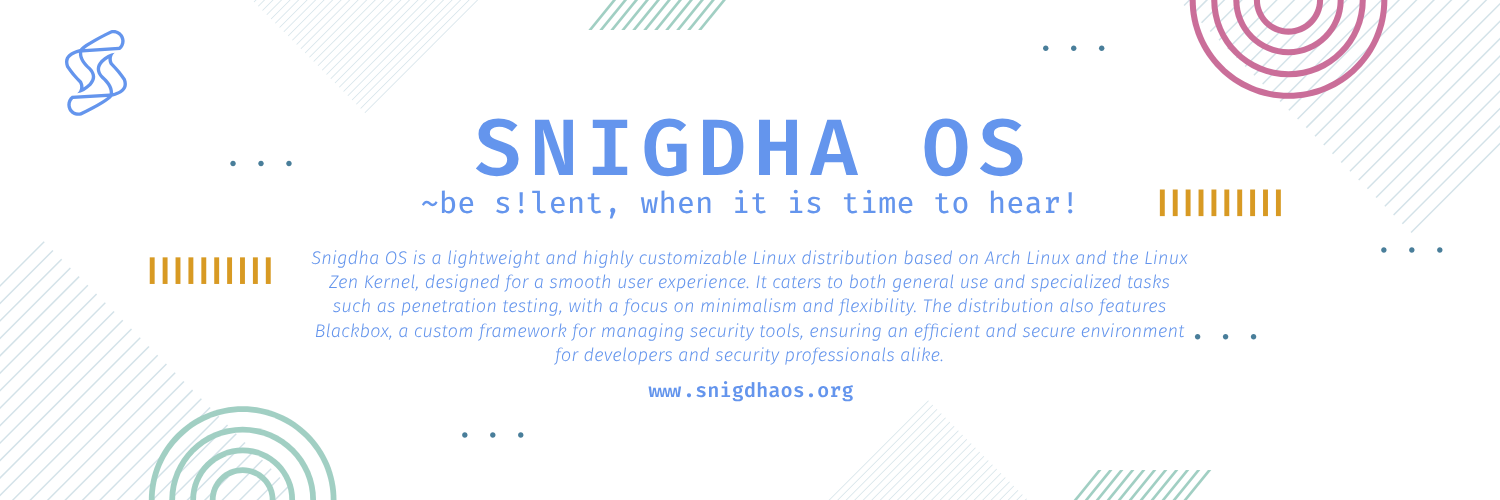
<style>
.page{position:relative;width:1500px;height:500px;background:#ffffff}
.page>*{position:absolute;margin:0}
.t1{font:80px "FiraCode-SemiBold";letter-spacing:0.1em;color:#6495ed}
.t2{font:30px "FiraCode-Retina";letter-spacing:0.01em;color:#6495ed}
.t3{font:18.2px/24.5px "FiraSans-LightItalic";letter-spacing:0.01em;color:#6495ed}
.t4{font:20px "FiraCode-SemiBold";letter-spacing:0.01em;color:#6495ed}
</style>
<div class="page">
<p class="t1" style="left:475px;top:118px;width:548px;height:59px">SNIGDHA OS</p>
<p class="t2" style="left:421px;top:189px;width:652px;height:30px">~be s!lent, when it is time to hear!</p>
<p class="t3" style="left:311px;top:250px;width:877px;height:115px;text-align:center">Snigdha OS is a lightweight and highly customizable Linux distribution based on Arch Linux and the Linux Zen Kernel, designed for a smooth user experience. It caters to both general use and specialized tasks such as penetration testing, with a focus on minimalism and flexibility. The distribution also features Blackbox, a custom framework for managing security tools, ensuring an efficient and secure environment for developers and security professionals alike.</p>
<p class="t4" style="left:648px;top:381px;width:205px;height:21px">www.snigdhaos.org</p>
</div>
